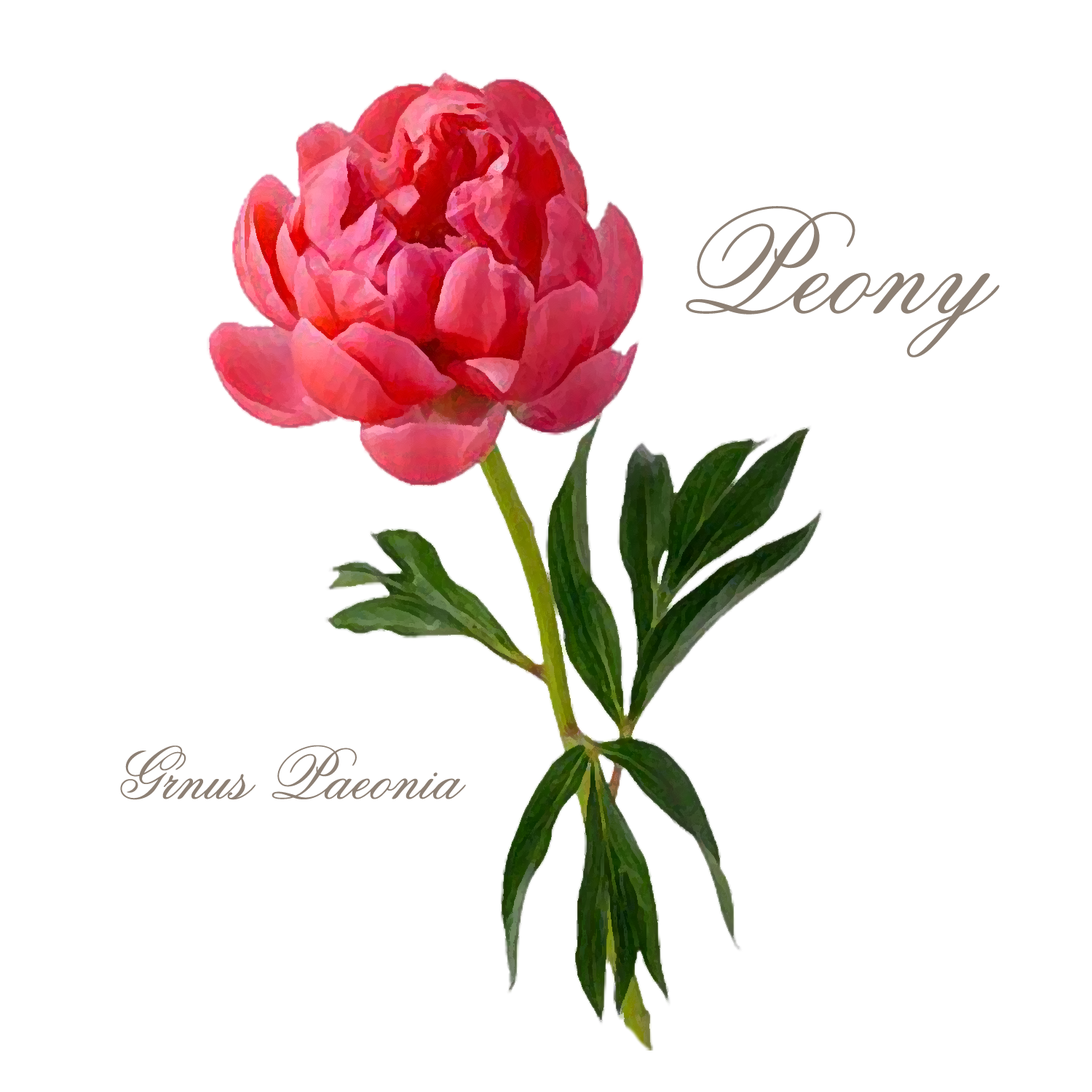
<style>
.page{position:relative;width:1092px;height:1092px;background:#ffffff}
.page>*{position:absolute;margin:0}
.t1{font:145.6px "Old-Scrip";color:#8d8074}
.t2{font:72.8px "Old-Scrip";color:#8d8074}
</style>
<div class="page">
<p class="t1" style="left:686px;top:206px;width:314px;height:151px">Peony</p>
<p class="t2" style="left:120px;top:745px;width:346px;height:55px">Grnus Paeonia</p>
</div>
